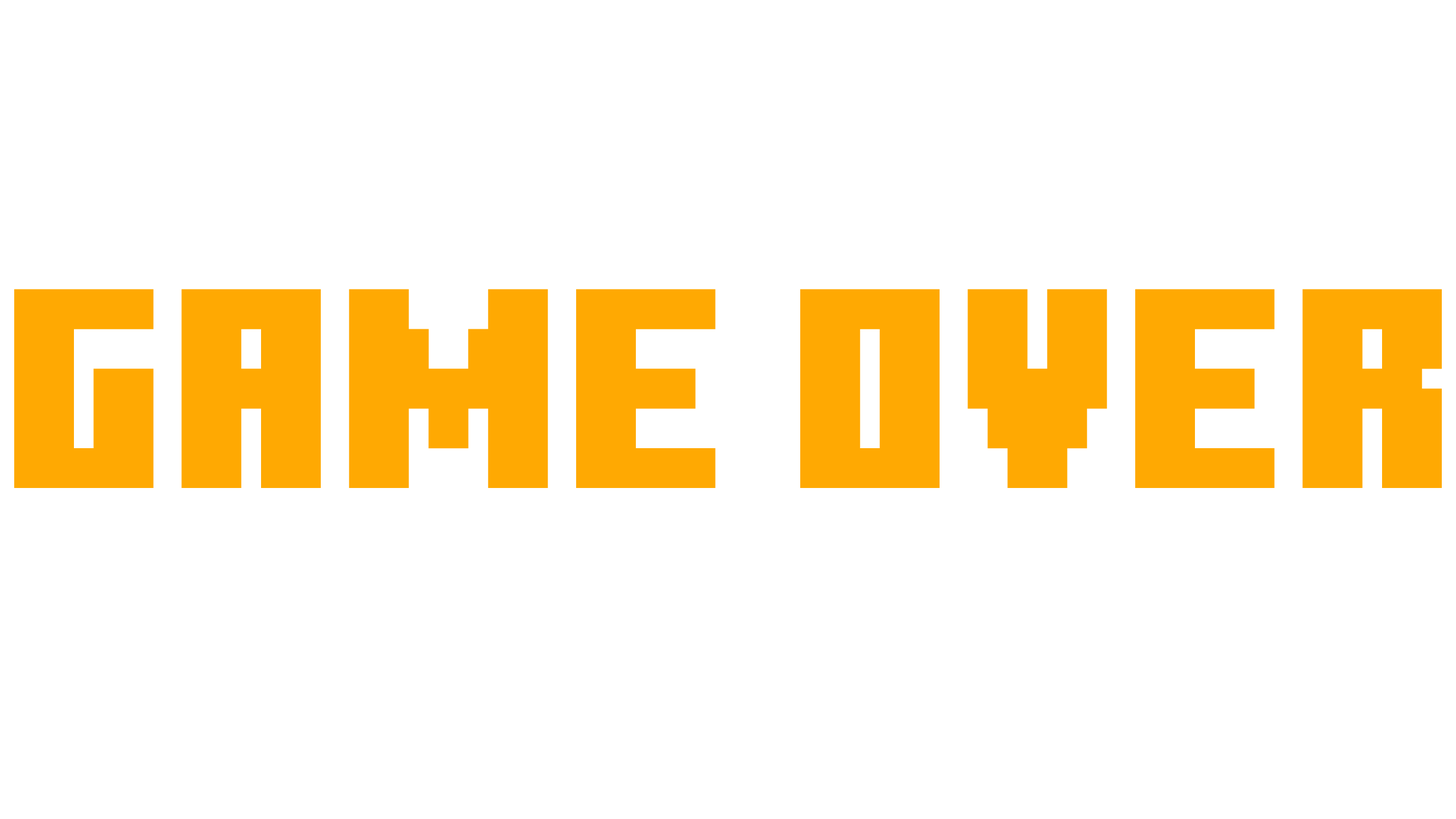
<style>
.page{position:relative;width:1456px;height:819px;background:#ffffff}
.page>*{position:absolute;margin:0}
.t1{font:283.8px "MinecraftTen";color:#ffa902}
</style>
<div class="page">
<p class="t1" style="left:14px;top:289px;width:1428px;height:199px">game over</p>
</div>
